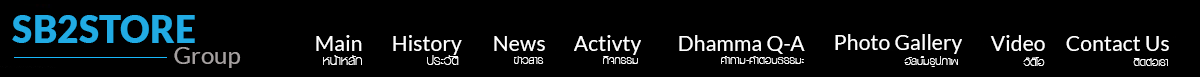
<style>
.page{position:relative;width:1200px;height:77px;background:#000000}
.page>*{position:absolute;margin:0}
.t1{font:21.3px "Lato-Regular";color:#ffffff}
.t2{font:18.7px "SMBxLight";color:#ffffff}
.t3{font:16px "SMBxLight";color:#ffffff}
</style>
<div class="page">
<p class="t1" style="left:316px;top:35px;width:46px;height:16px">Main</p>
<p class="t1" style="left:393px;top:35px;width:69px;height:20px">History</p>
<p class="t1" style="left:494px;top:36px;width:51px;height:15px">News</p>
<p class="t1" style="left:574px;top:35px;width:67px;height:20px">Activty</p>
<p class="t1" style="left:679px;top:35px;width:126px;height:19px">Dhamma Q-A</p>
<p class="t1" style="left:835px;top:34px;width:127px;height:20px">Photo Gallery</p>
<p class="t1" style="left:990px;top:35px;width:55px;height:16px">Video</p>
<p class="t1" style="left:1066px;top:36px;width:103px;height:15px">Contact Us</p>
<p class="t2" style="left:323px;top:55px;width:39px;height:10px">หน้าหลัก</p>
<p class="t2" style="left:427px;top:55px;width:32px;height:10px">ประวัติ</p>
<p class="t3" style="left:514px;top:56px;width:30px;height:8px">ข่าวสาร</p>
<p class="t3" style="left:603px;top:56px;width:35px;height:8px">กิจกรรม</p>
<p class="t3" style="left:721px;top:56px;width:83px;height:8px">คำถาม-คำตอบธรรมะ</p>
<p class="t3" style="left:904px;top:56px;width:54px;height:11px">อัลบั้มรูปภาพ</p>
<p class="t3" style="left:1023px;top:57px;width:22px;height:9px">ว๊ด๊โอ</p>
<p class="t3" style="left:1133px;top:58px;width:35px;height:8px">ติดต่อเรา</p>
</div>
